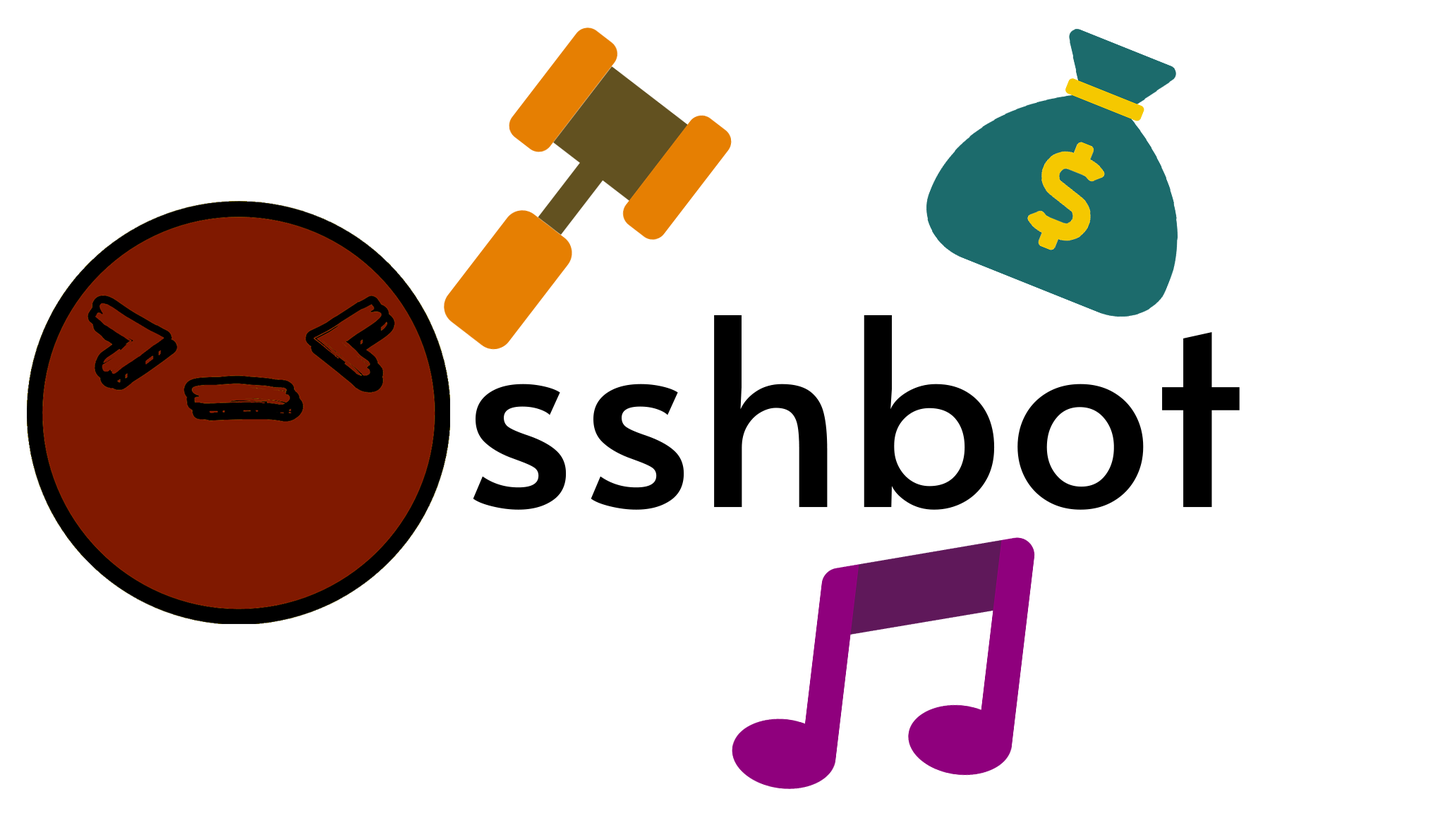
<style>
.page{position:relative;width:1445px;height:825px;background:#ffffff}
.page>*{position:absolute;margin:0}
.t1{font:261px "Alata-Regular";color:#000000}
</style>
<div class="page">
<p class="t1" style="left:473px;top:315px;width:766px;height:195px">sshbot</p>
</div>
